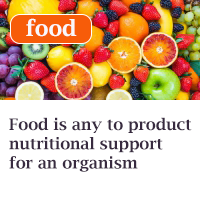
<style>
.page{position:relative;width:200px;height:200px;background:#ffffff}
.page>*{position:absolute;margin:0}
.t1{font:22px "LucidaBright-Demi";color:#f9f8fa}
.t2{font:16px "LucidaBright-Demi";color:#382b40}
</style>
<div class="page">
<p class="t1" style="left:26px;top:18px;width:51px;height:19px">food</p>
<p class="t2" style="left:9px;top:117px;width:183px;height:55px">Food is any to product<br>nutritional support <br>for an organism</p>
</div>
